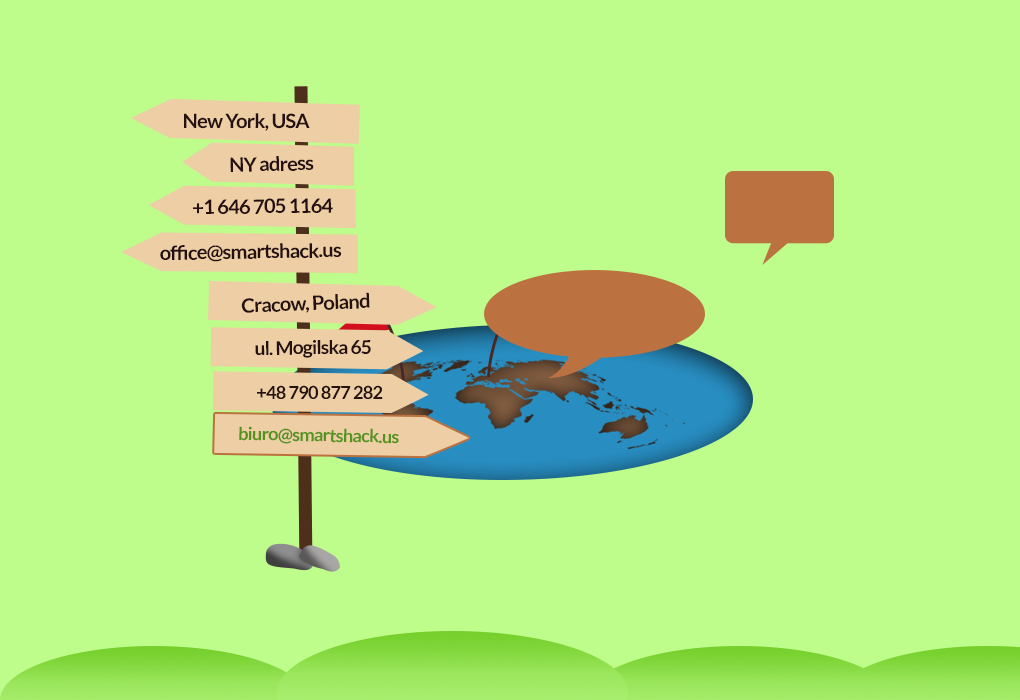
<style>
.page{position:relative;width:1020px;height:700px;background:#befc8b}
.page>*{position:absolute;margin:0}
.t1{font:20px "Lato-Bold";letter-spacing:-0.04em;color:#261111}
.t2{font:20px "Lato-Bold";letter-spacing:-0.04em;color:#241010}
.t3{font:19px "Lato-Bold";letter-spacing:-0.04em;color:#261111}
.t4{font:18px "Lato-Bold";letter-spacing:-0.04em;color:#261111}
.t5{font:18px "Lato-Bold";letter-spacing:-0.04em;color:#549320}
</style>
<div class="page">
<p class="t1" style="left:184px;top:113px;width:126px;height:18px">New York, USA</p>
<p class="t2" style="left:230px;top:156px;width:84px;height:16px;rotate:-1deg">NY adress</p>
<p class="t2" style="left:193px;top:198px;width:140px;height:16px;rotate:-1deg">+1 646 705 1164</p>
<p class="t2" style="left:160px;top:243px;width:182px;height:19px;rotate:-1deg">office@smartshack.us</p>
<p class="t1" style="left:241px;top:292px;width:129px;height:21px;rotate:-2deg">Cracow, Poland</p>
<p class="t3" style="left:255px;top:340px;width:116px;height:18px">ul. Mogilska 65</p>
<p class="t4" style="left:257px;top:385px;width:126px;height:14px">+48 790 877 282</p>
<p class="t5" style="left:239px;top:426px;width:160px;height:18px;rotate:1deg">biuro@smartshack.us</p>
</div>
